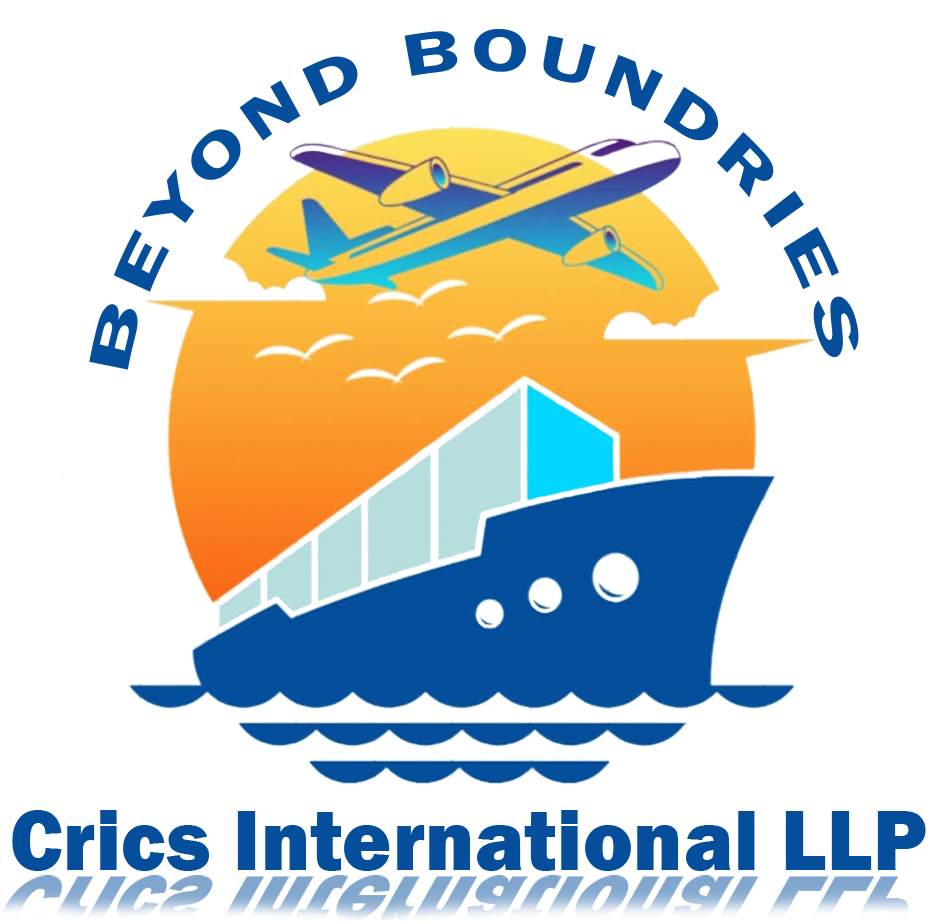
<style>
.page{position:relative;width:930px;height:924px;background:#ffffff}
.page>*{position:absolute;margin:0}
.t1{font:62px "FranklinGothic-Demi";letter-spacing:0.12em;color:#044e9c;scale:0.96 1}
.t2{font:87.9px "FranklinGothic-Heavy";letter-spacing:0.006em;color:#044e9c;scale:0.96 1}
</style>
<div class="page">
<p class="t1" style="left:89px;top:28px;width:770px;height:342px">BEYOND BOUNDRIES</p>
<p class="t2" style="left:12px;top:810px;width:914px;height:61px">Crics International LLP</p>
</div>
